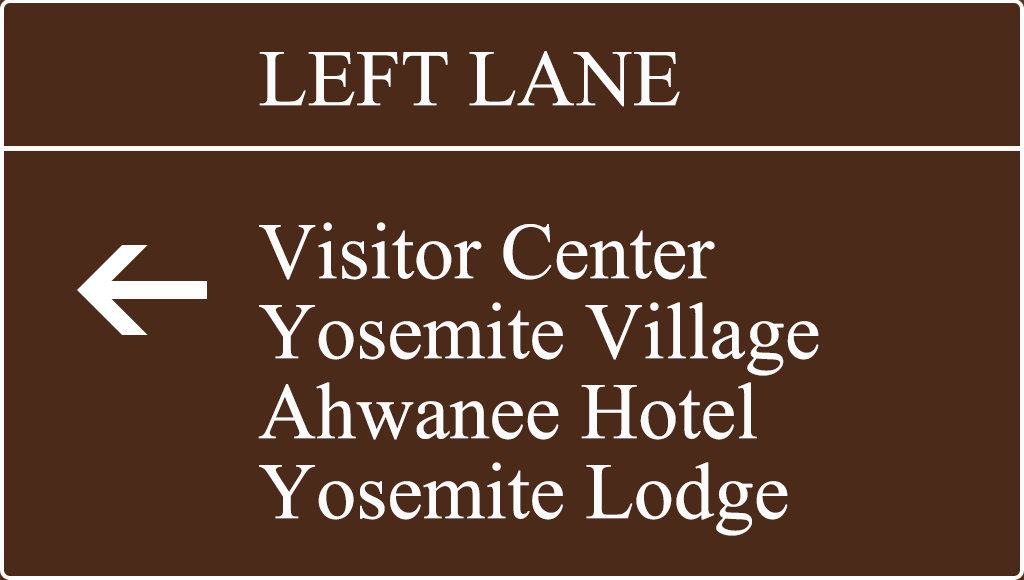
<style>
.page{position:relative;width:1024px;height:580px;background:#4c2a19}
.page>*{position:absolute;margin:0}
.t1{font:80px "IskoolaPota";color:#fbfbfb}
.t2{font:80px/80px "IskoolaPota";color:#fbfbfb}
</style>
<div class="page">
<p class="t1" style="left:259px;top:51px;width:421px;height:56px">LEFT LANE</p>
<p class="t2" style="left:258px;top:222px;width:561px;height:314px">Visitor Center<br>Yosemite Village<br>Ahwanee Hotel<br>Yosemite Lodge</p>
</div>
